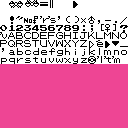
<style>
.page{position:relative;width:128px;height:128px;background:#ee4594}
.page>*{position:absolute;margin:0}
.t1{font:8px/8px "PokemonTTF";color:#000000}
.t2{font:8px/8px "MyriadPro-Regular";color:#000000}
</style>
<div class="page">
<p class="t1" style="left:0px;top:16px;width:128px;height:48px">!"#$%&amp;`()*+,-./<br>0123456789:;&lt;=&gt;?<br>@ABCDEFGHIJKLMNO<br>PQRSTUVWXYZ[\]^<span class="t2">__<br></span>`abcdefghijklmno<br>pqrstuvwxyz{|}~</p>
</div>
